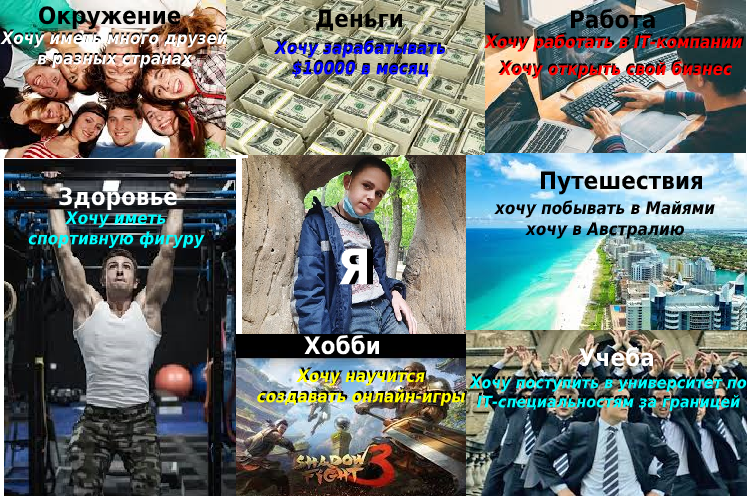
<style>
.page{position:relative;width:747px;height:496px}
.page>*{position:absolute;margin:0}
.t1{font:24px "DejaVuSansCondensed-Bold";color:#000000}
.t2{font:17px "DejaVuSansCondensed-BoldOblique";color:#ffffff}
.t3{font:17px "DejaVuSansCondensed-BoldOblique"}
.t4{font:17px "DejaVuSansCondensed-BoldOblique";color:#0000ff}
.t5{font:17px "DejaVuSansCondensed-BoldOblique";color:#ff0000}
.t6{font:24px "DejaVuSansCondensed-Bold";color:#ffffff}
.t7{font:17px "DejaVuSansCondensed-BoldOblique";color:#000000}
.t8{font:17px "DejaVuSansCondensed-BoldOblique";color:#00ffff}
.t9{font:49px "DejaVuSansCondensed-Bold";color:#ffffff}
.t10{font:49px "DejaVuSansCondensed-Bold"}
.t11{font:17px "DejaVuSansCondensed-BoldOblique";color:#ffff00}
.t12{font:16px "DejaVuSansCondensed-BoldOblique"}
.t13{font:16px "DejaVuSansCondensed-BoldOblique";color:#00ffff}
</style>
<div class="page">
<p class="t1" style="left:39px;top:6px;width:142px;height:24px">Окружение</p>
<p class="t1" style="left:316px;top:9px;width:87px;height:22px">Деньги</p>
<p class="t1" style="left:570px;top:8px;width:85px;height:21px">Работа</p>
<p class="t2" style="left:0px;top:30px;width:228px;height:38px;text-align:center">Хочу иметь много друзей в разных странах</p>
<p class="t3" style="left:274px;top:38px;width:171px;height:37px;text-align:center">Хочу зарабатывать $10000 в месяц</p>
<p class="t4" style="left:274px;top:40px;width:171px;height:37px;text-align:center">Хочу зарабатывать $10000 в месяц</p>
<p class="t5" style="left:484px;top:34px;width:258px;height:18px">Хочу работать в IT-компании</p>
<p class="t3" style="left:486px;top:32px;width:258px;height:18px">Хочу работать в IT-компании</p>
<p class="t3" style="left:498px;top:59px;width:233px;height:18px">Хочу открыть свой бизнес</p>
<p class="t5" style="left:499px;top:61px;width:233px;height:18px">Хочу открыть свой бизнес</p>
<p class="t1" style="left:540px;top:171px;width:163px;height:24px">Путешествия</p>
<p class="t6" style="left:59px;top:187px;width:118px;height:23px">Здоровье</p>
<p class="t7" style="left:494px;top:200px;width:221px;height:18px">хочу побывать в Майями</p>
<p class="t8" style="left:28px;top:211px;width:177px;height:37px;text-align:center">Хочу иметь спортивную фигуру</p>
<p class="t7" style="left:525px;top:222px;width:160px;height:17px">хочу в Австралию</p>
<p class="t9" style="left:339px;top:248px;width:28px;height:37px">Я</p>
<p class="t10" style="left:345px;top:248px;width:28px;height:37px">Я</p>
<p class="t6" style="left:304px;top:334px;width:75px;height:21px">Хобби</p>
<p class="t6" style="left:579px;top:346px;width:75px;height:21px">Учеба</p>
<p class="t11" style="left:257px;top:369px;width:208px;height:37px;text-align:center">Хочу научится создавать онлайн-игры</p>
<p class="t3" style="left:259px;top:367px;width:208px;height:37px;text-align:center">Хочу научится создавать онлайн-игры</p>
<p class="t12" style="left:469px;top:373px;width:278px;height:35px;text-align:center">Хочу поступить в университет по IT-специальностям за границей</p>
<p class="t13" style="left:469px;top:376px;width:278px;height:35px;text-align:center">Хочу поступить в университет по IT-специальностям за границей</p>
</div>
